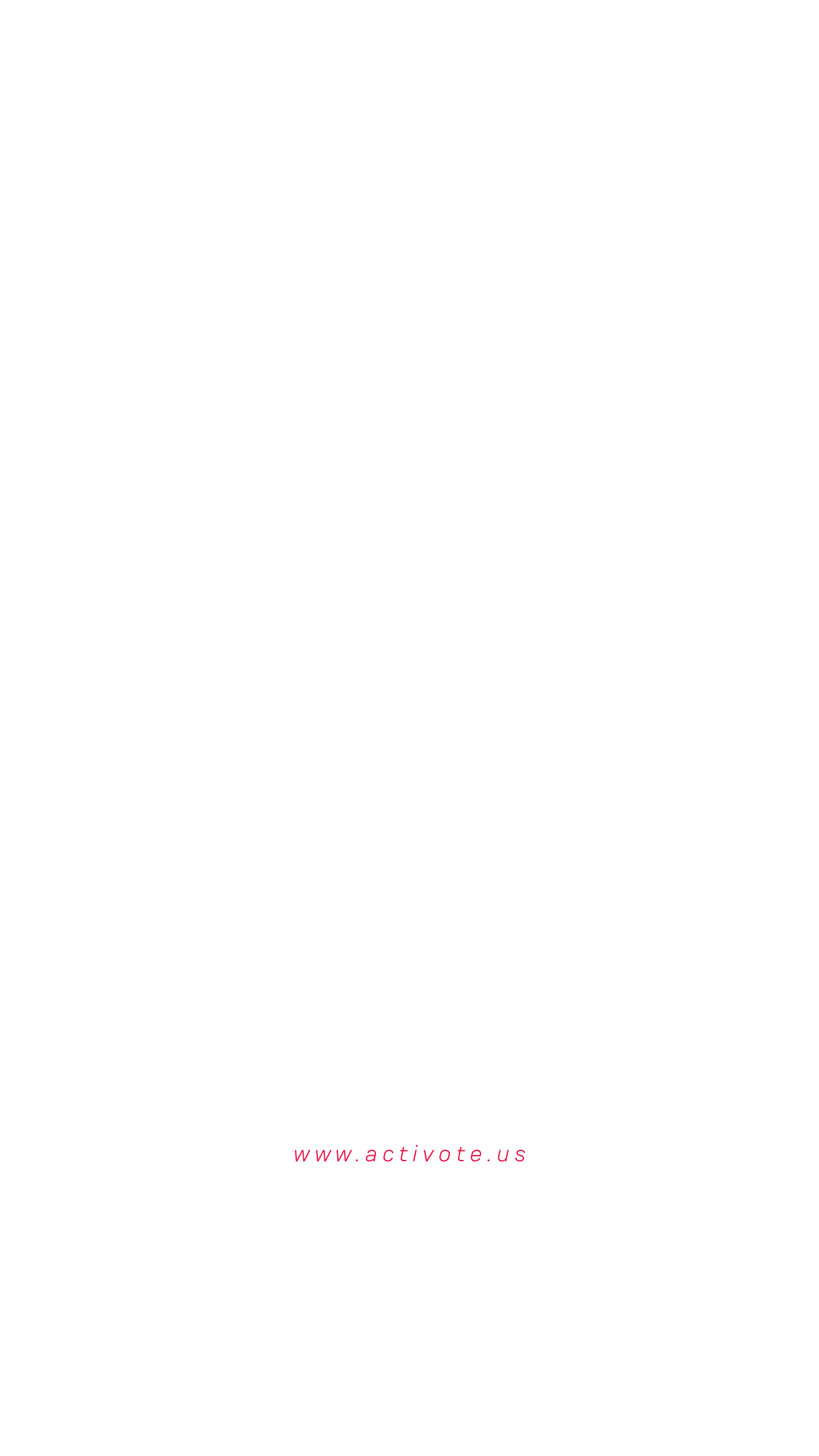
<style>
.page{position:relative;width:819px;height:1456px;background:#ffffff}
.page>*{position:absolute;margin:0}
.t1{font:23.5px "TTRoundsNeue-LightItalic";letter-spacing:0.2em;color:#e81f4e}
</style>
<div class="page">
<p class="t1" style="left:295px;top:1145px;width:230px;height:17px">www.activote.us</p>
</div>
